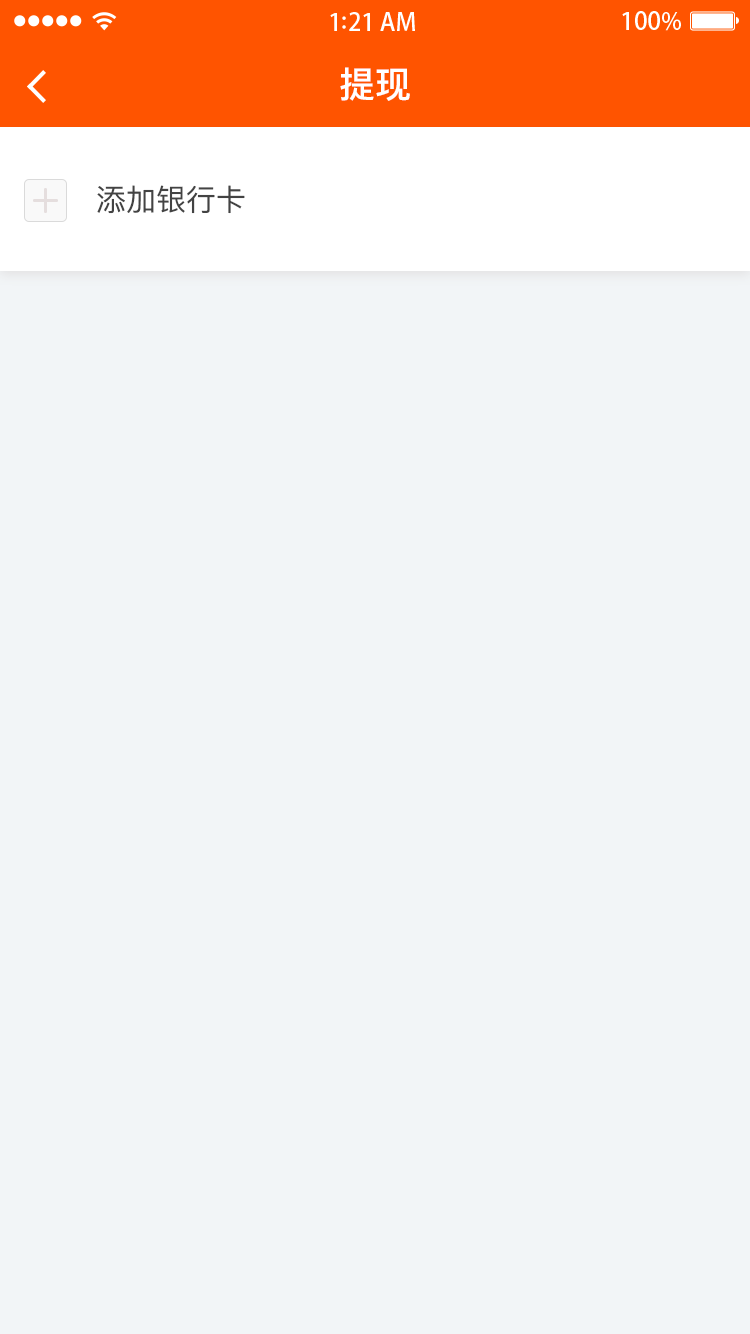
<style>
.page{position:relative;width:750px;height:1334px;background:#f2f5f7}
.page>*{position:absolute;margin:0}
.t1{font:36px "PingFangSC-Medium";color:#ffffff}
.t2{font:30px "PingFangSC-Regular";color:#434343}
</style>
<div class="page">
<p class="t1" style="left:340px;top:67px;width:70px;height:34px">提现</p>
<p class="t2" style="left:97px;top:185px;width:148px;height:29px">添加银行卡</p>
</div>
